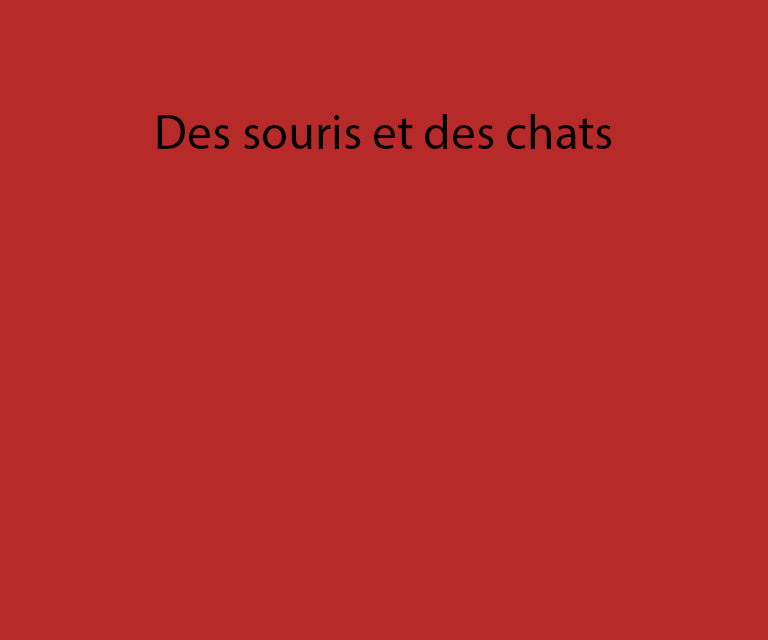
<style>
.page{position:relative;width:768px;height:640px;background:#b72a2a}
.page>*{position:absolute;margin:0}
.t1{font:49px "MyriadPro-Regular";color:#000000}
</style>
<div class="page">
<p class="t1" style="left:157px;top:114px;width:455px;height:35px">Des souris et des chats</p>
</div>
